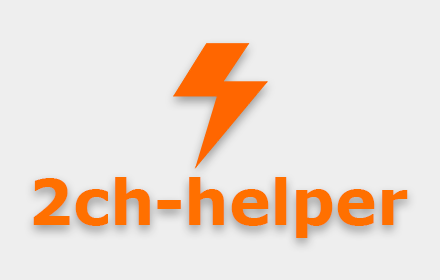
<style>
.page{position:relative;width:440px;height:280px;background:#eeeeee}
.page>*{position:absolute;margin:0}
.t1{font:62.5px "Verdana-Bold";color:#ff7000}
</style>
<div class="page">
<p class="t1" style="left:33px;top:177px;width:375px;height:61px">2ch-helper</p>
</div>
